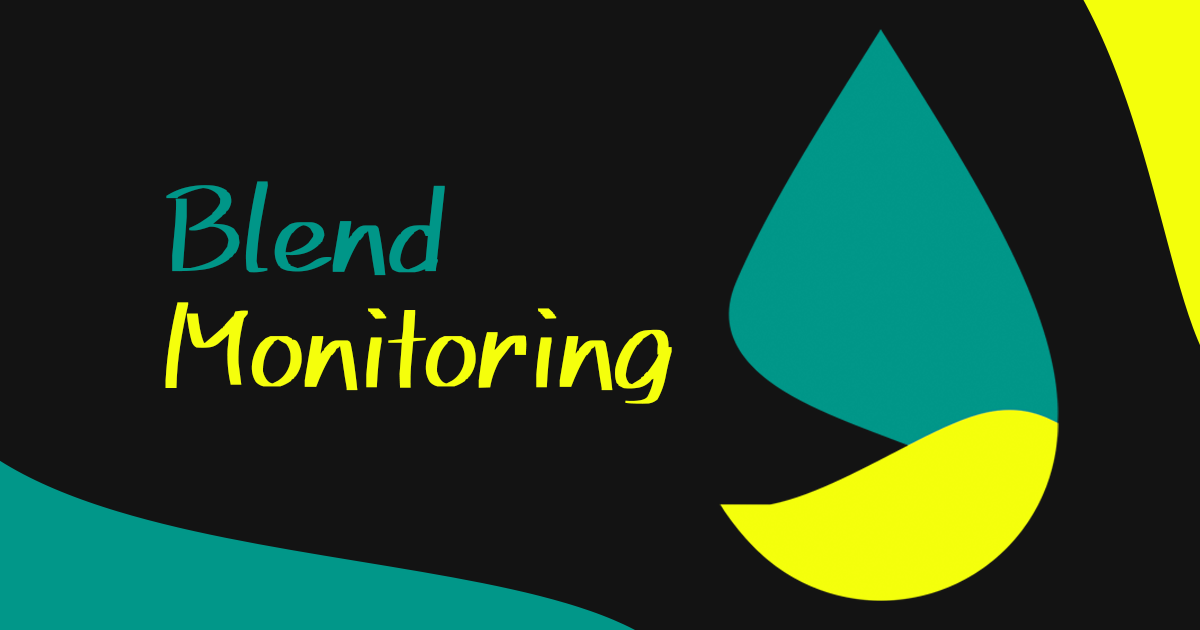
<style>
.page{position:relative;width:1200px;height:630px;background:#131313}
.page>*{position:absolute;margin:0}
.t1{font:133px/115px "851MkPOP";letter-spacing:-0.03em;color:#f5ff0c;scale:0.93 1}
.t2{font:133px/115px "851MkPOP";letter-spacing:-0.03em;color:#009688;scale:0.93 1}
</style>
<div class="page">
<p class="t1" style="left:165px;top:181px;width:507px;height:223px"><span class="t2">Blend<br></span>Monitoring</p>
</div>
